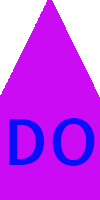
<style>
.page{position:relative;width:100px;height:200px;background:#cb0bf4}
.page>*{position:absolute;margin:0}
.t1{font:60px "EuphemiaUCAS-Bold";letter-spacing:0.02em;color:#090ef9}
</style>
<div class="page">
<p class="t1" style="left:9px;top:118px;width:86px;height:48px">DO</p>
</div>
